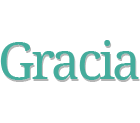
<style>
.page{position:relative;width:140px;height:123px;background:#ffffff}
.page>*{position:absolute;margin:0}
.t1{font:50.8px "DroidSerif";letter-spacing:-0.06em;color:#44ac9c}
</style>
<div class="page">
<p class="t1" style="left:0px;top:40px;width:139px;height:40px">Gracia</p>
</div>
